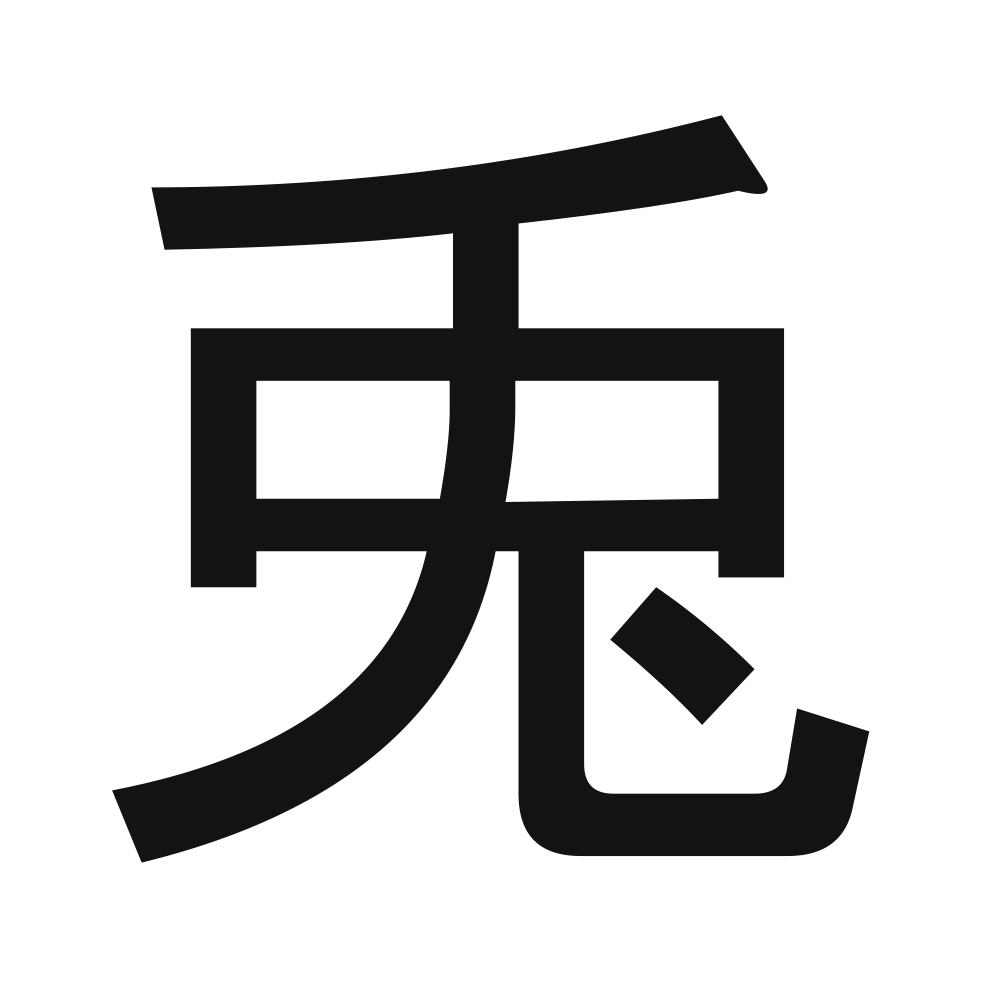
<style>
.page{position:relative;width:1000px;height:1000px;background:#ffffff}
.page>*{position:absolute;margin:0}
.t1{font:839.3px "MS-Gothic";color:#131313}
</style>
<div class="page">
<p class="t1" style="left:112px;top:115px;width:758px;height:748px">兎</p>
</div>
